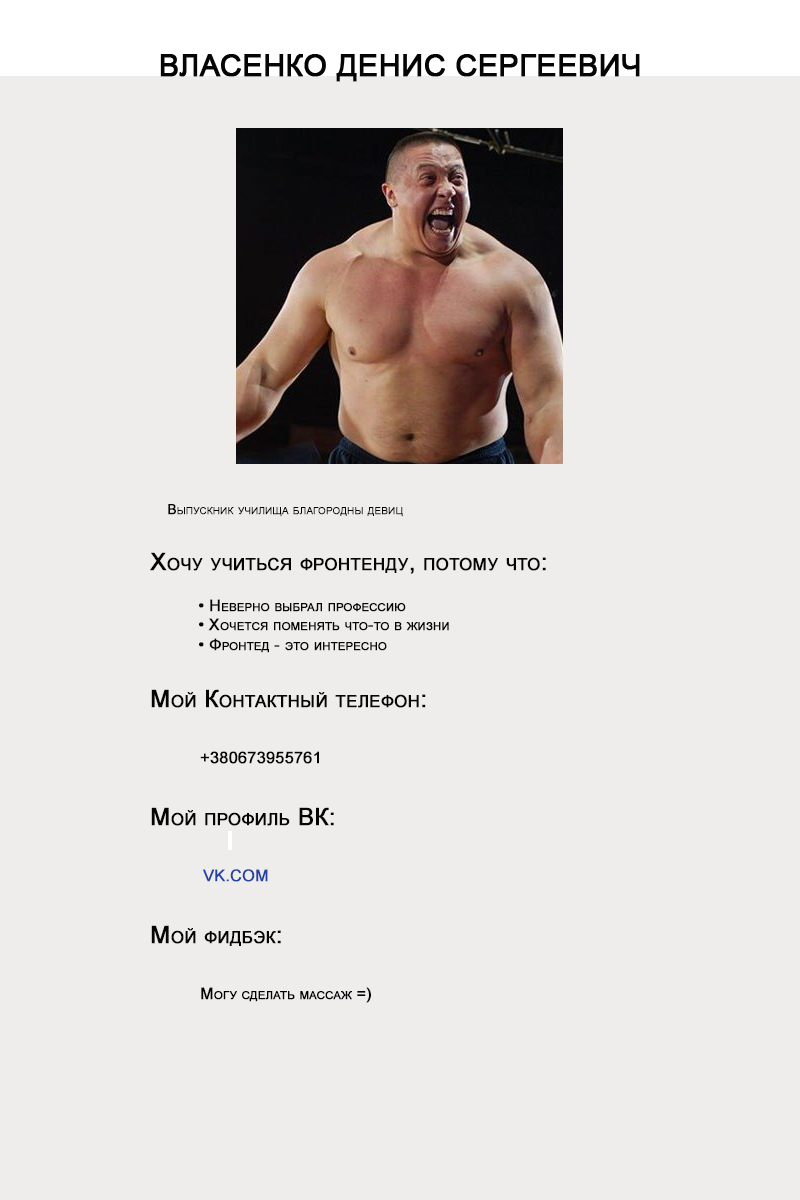
<style>
.page{position:relative;width:800px;height:1200px;background:#efecec}
.page>*{position:absolute;margin:0}
.t1{font:30px "ArialMT";color:#050505;font-variant:small-caps;font-weight:bold}
.t2{font:14px "ArialMT";color:#050505;font-variant:small-caps;font-weight:bold}
.t3{font:24px "ArialMT";color:#050505;font-variant:small-caps;font-weight:bold}
.t4{font:16px "ArialMT";color:#050505;font-variant:small-caps;font-weight:bold}
.t5{font:16px "ArialMT";color:#2243a1;font-variant:small-caps;font-weight:bold}
.t6{font:16px "ArialMT";color:#000102;font-variant:small-caps;font-weight:bold}
</style>
<div class="page">
<p class="t1" style="left:160px;top:54px;width:480px;height:28px">ВЛАСЕНКО ДЕНИС СЕРГЕЕВИЧ</p>
<p class="t2" style="left:168px;top:504px;width:235px;height:13px">Выпускник училища благородны девиц</p>
<p class="t3" style="left:150px;top:552px;width:396px;height:22px">Хочу учиться фронтенду, потому что:</p>
<p class="t4" style="left:199px;top:599px;width:250px;height:54px">• Неверно выбрал профессию<br>• Хочется поменять что-то в жизни<br>• Фронтед - это интересно</p>
<p class="t3" style="left:151px;top:689px;width:275px;height:19px">Мой Контактный телефон:</p>
<p class="t4" style="left:200px;top:751px;width:119px;height:13px">+380673955761</p>
<p class="t3" style="left:151px;top:807px;width:183px;height:19px">Мой профиль ВК:</p>
<p class="t5" style="left:203px;top:869px;width:65px;height:13px">VK.COM</p>
<p class="t3" style="left:151px;top:925px;width:130px;height:21px">Мой фидбэк:</p>
<p class="t6" style="left:201px;top:987px;width:170px;height:16px">Могу сделать массаж =)</p>
</div>
